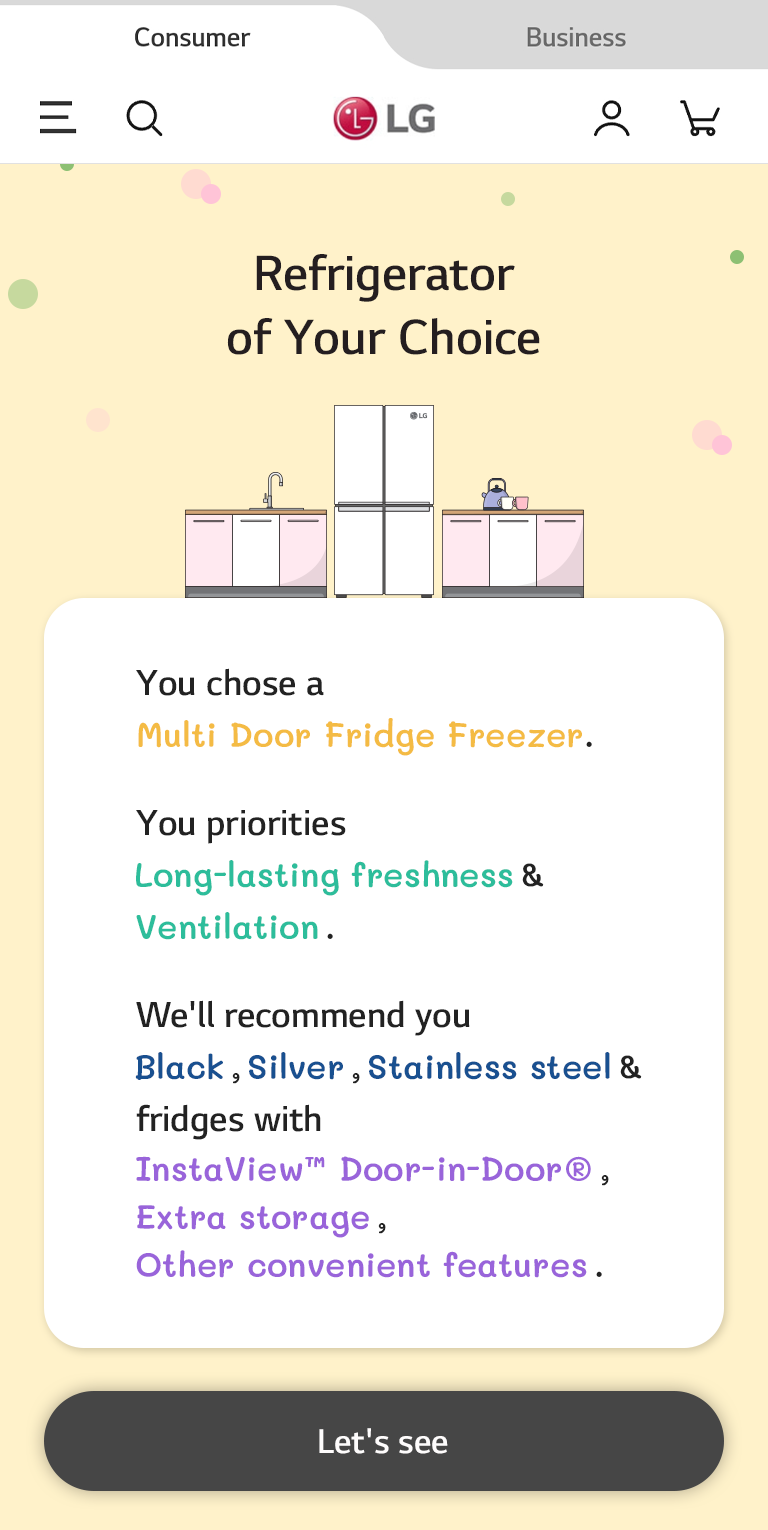
<style>
.page{position:relative;width:768px;height:1530px;background:#ffffff}
.page>*{position:absolute;margin:0}
.t1{font:52px/64px "LGSmartLight-SemiBold";color:#241e20}
.t2{font:38px "LGSmartLight-SemiBold";color:#222222}
.t3{font:34px "Mali-SemiBold";color:#f4bb44}
.t4{font:34px "Mali-SemiBold";color:#222222}
.t5{font:34px "Mali-SemiBold";color:#2dbd9b}
.t6{font:34px "Mali-SemiBold";color:#195090}
.t7{font:34px "Mali-SemiBold";color:#9964da}
.t8{font:36px "LGSmartLight-SemiBold";color:#fefcfc}
</style>
<div class="page">
<p class="t1" style="left:227px;top:254px;width:313px;height:101px;text-align:center">Refrigerator<br>of Your Choice</p>
<p class="t2" style="left:136px;top:668px;width:188px;height:28px">You chose a</p>
<p class="t3" style="left:138px;top:718px;width:454px;height:38px">Multi Door Fridge Freezer<span class="t4">.</span></p>
<p class="t2" style="left:136px;top:810px;width:210px;height:34px">You priorities</p>
<p class="t5" style="left:136px;top:860px;width:408px;height:36px">Long-lasting freshness <span class="t4">&amp;</span></p>
<p class="t5" style="left:136px;top:912px;width:197px;height:28px">Ventilation <span class="t4">.</span></p>
<p class="t2" style="left:136px;top:1000px;width:334px;height:36px">We'll recommend you</p>
<p class="t6" style="left:135px;top:1052px;width:507px;height:32px">Black <span class="t4">, </span>Silver <span class="t4">, </span>Stainless steel <span class="t4">&amp;</span></p>
<p class="t2" style="left:136px;top:1104px;width:185px;height:36px">fridges with</p>
<p class="t7" style="left:136px;top:1156px;width:473px;height:30px">InstaView™ Door-in-Door® <span class="t4">,</span></p>
<p class="t7" style="left:137px;top:1205px;width:249px;height:33px">Extra storage <span class="t4">,</span></p>
<p class="t7" style="left:136px;top:1250px;width:466px;height:28px">Other convenient features <span class="t4">.</span></p>
<p class="t8" style="left:319px;top:1428px;width:129px;height:26px">Let's see</p>
</div>
